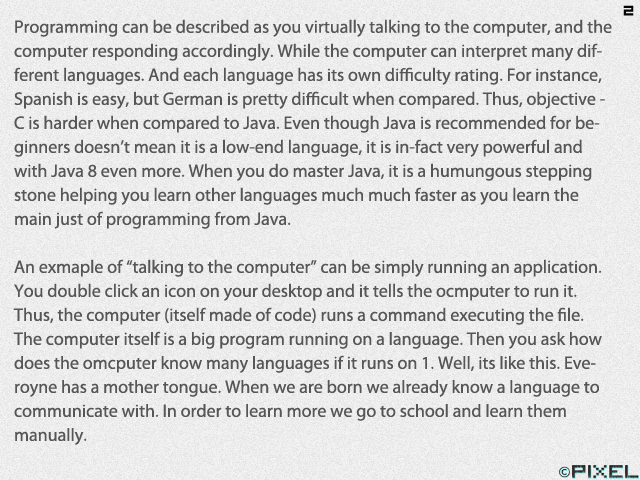
<style>
.page{position:relative;width:640px;height:480px}
.page>*{position:absolute;margin:0}
.t1{font:24px "VisitorTT2BRK";color:#050505}
.t2{font:18px/24px "MyriadPro-Regular";color:#565656}
</style>
<div class="page">
<p class="t1" style="left:623px;top:5px;width:11px;height:11px">2</p>
<p class="t2" style="left:13px;top:19px;width:599px;height:426px">Programming can be described as you virtually talking to the computer, and the computer responding accordingly. While the computer can interpret many different languages. And each language has its own difficulty rating. For instance, Spanish is easy, but German is pretty difficult when compared. Thus, objective - C is harder when compared to Java. Even though Java is recommended for beginners doesn’t mean it is a low-end language, it is in-fact very powerful and with Java 8 even more. When you do master Java, it is a humungous stepping stone helping you learn other languages much much faster as you learn the main just of programming from Java.<br><br>An exmaple of “talking to the computer” can be simply running an application. You double click an icon on your desktop and it tells the ocmputer to run it. Thus, the computer (itself made of code) runs a command executing the file. The computer itself is a big program running on a language. Then you ask how does the omcputer know many languages if it runs on 1. Well, its like this. Everoyne has a mother tongue. When we are born we already know a language to communicate with. In order to learn more we go to school and learn them manually.</p>
</div>
